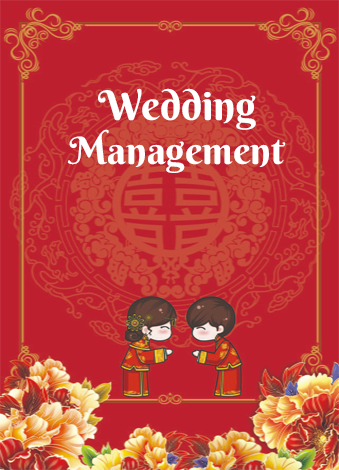
<style>
.page{position:relative;width:339px;height:470px;background:#be1f2f}
.page>*{position:absolute;margin:0}
.t1{font:41.1px "BerkshireSwash-Regular";color:#ffffff}
.t2{font:37.8px "BerkshireSwash-Regular";color:#ffffff}
</style>
<div class="page">
<p class="t1" style="left:98px;top:88px;width:158px;height:42px">Wedding</p>
<p class="t2" style="left:67px;top:129px;width:219px;height:44px">Management</p>
</div>
